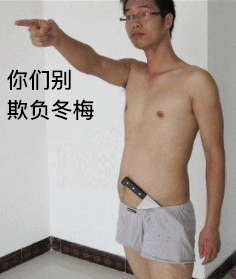
<style>
.page{position:relative;width:236px;height:279px}
.page>*{position:absolute;margin:0}
.t1{font:22px/30px "PingFangSC-Medium";color:#000000}
</style>
<div class="page">
<p class="t1" style="left:7px;top:69px;width:87px;height:52px">你们别<br>欺负冬梅</p>
</div>
